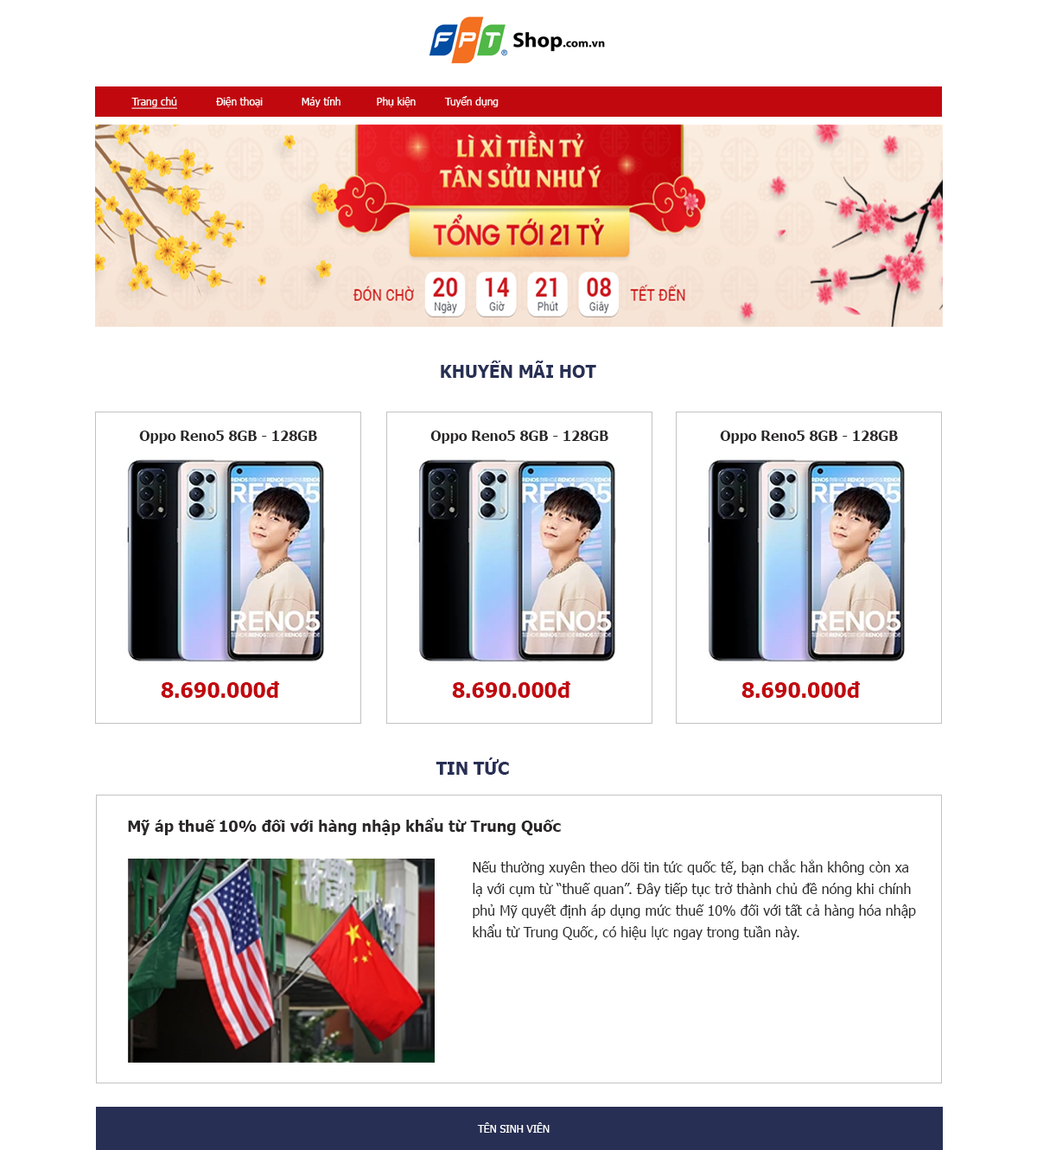
<style>
.page{position:relative;width:1037px;height:1150px;background:#ffffff}
.page>*{position:absolute;margin:0}
.t1{font:10.4px "Tahoma";color:#fefbfb}
.t2{font:10.4px "Tahoma";color:#fefbfb;text-decoration:underline}
.t3{font:17.3px "Tahoma-Bold";color:#272f54}
.t4{font:13.8px "Tahoma-Bold";color:#2a2828}
.t5{font:20.7px "Tahoma-Bold";color:#c1080f}
.t6{font:15.6px "Tahoma-Bold";color:#2a2828}
.t7{font:13.8px/21.6px "Tahoma";color:#2a2828}
.t8{font:10.4px "Tahoma";color:#ffffff}
</style>
<div class="page">
<p class="t1" style="left:131px;top:96px;width:368px;height:13px"><span class="t2">Trang chủ</span>            Điện thoại            Máy tính           Phụ kiện         Tuyển dụng</p>
<p class="t3" style="left:441px;top:360px;width:155px;height:18px">KHUYẾN MÃI HOT</p>
<p class="t4" style="left:139px;top:430px;width:178px;height:13px">Oppo Reno5 8GB - 128GB</p>
<p class="t4" style="left:430px;top:430px;width:179px;height:13px">Oppo Reno5 8GB - 128GB</p>
<p class="t4" style="left:720px;top:430px;width:178px;height:13px">Oppo Reno5 8GB - 128GB</p>
<p class="t5" style="left:161px;top:681px;width:118px;height:17px">8.690.000đ</p>
<p class="t5" style="left:452px;top:681px;width:118px;height:17px">8.690.000đ</p>
<p class="t5" style="left:742px;top:681px;width:118px;height:17px">8.690.000đ</p>
<p class="t3" style="left:436px;top:757px;width:73px;height:17px">TIN TỨC</p>
<p class="t6" style="left:128px;top:818px;width:433px;height:17px">Mỹ áp thuế 10% đối với hàng nhập khẩu từ Trung Quốc</p>
<p class="t7" style="left:473px;top:859px;width:443px;height:81px">Nếu thường xuyên theo dõi tin tức quốc tế, bạn chắc hẳn không còn xa <br>lạ với cụm từ “thuế quan”. Đây tiếp tục trở thành chủ đề nóng khi chính <br>phủ Mỹ quyết định áp dụng mức thuế 10% đối với tất cả hàng hóa nhập <br>khẩu từ Trung Quốc, có hiệu lực ngay trong tuần này.</p>
<p class="t8" style="left:477px;top:1122px;width:73px;height:10px">TÊN SINH VIÊN</p>
</div>
